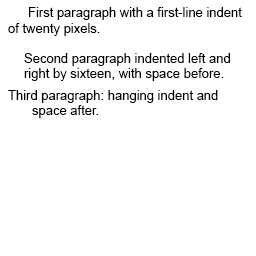
<style>
.page{position:relative;width:256px;height:256px;background:#ffffff}
.page>*{position:absolute;margin:0}
.t1{font:13px "ArialMT";color:#000000}
</style>
<div class="page">
<p class="t1" style="left:8px;top:7px;width:234px;height:111px">First paragraph with a first-line indent of twenty pixels.<br>Second paragraph indented left and right by sixteen, with space before.<br>Third paragraph: hanging indent and space after.</p>
</div>
